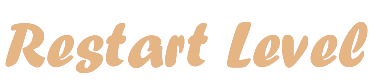
<style>
.page{position:relative;width:378px;height:80px;background:#ffffff}
.page>*{position:absolute;margin:0}
.t1{font:66.7px "ForteMT";color:#e5b684}
</style>
<div class="page">
<p class="t1" style="left:5px;top:22px;width:363px;height:51px">Restart Level</p>
<p class="t1" style="left:5px;top:22px;width:363px;height:51px">Restart Level</p>
</div>
